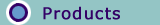
<style>
.page{position:relative;width:160px;height:25px;background:#94c5c5}
.page>*{position:absolute;margin:0}
.t1{font:16px "Verdana";letter-spacing:0.055em;color:#330066;font-weight:bold}
</style>
<div class="page">
<p class="t1" style="left:43px;top:6px;width:77px;height:14px">Products</p>
</div>
